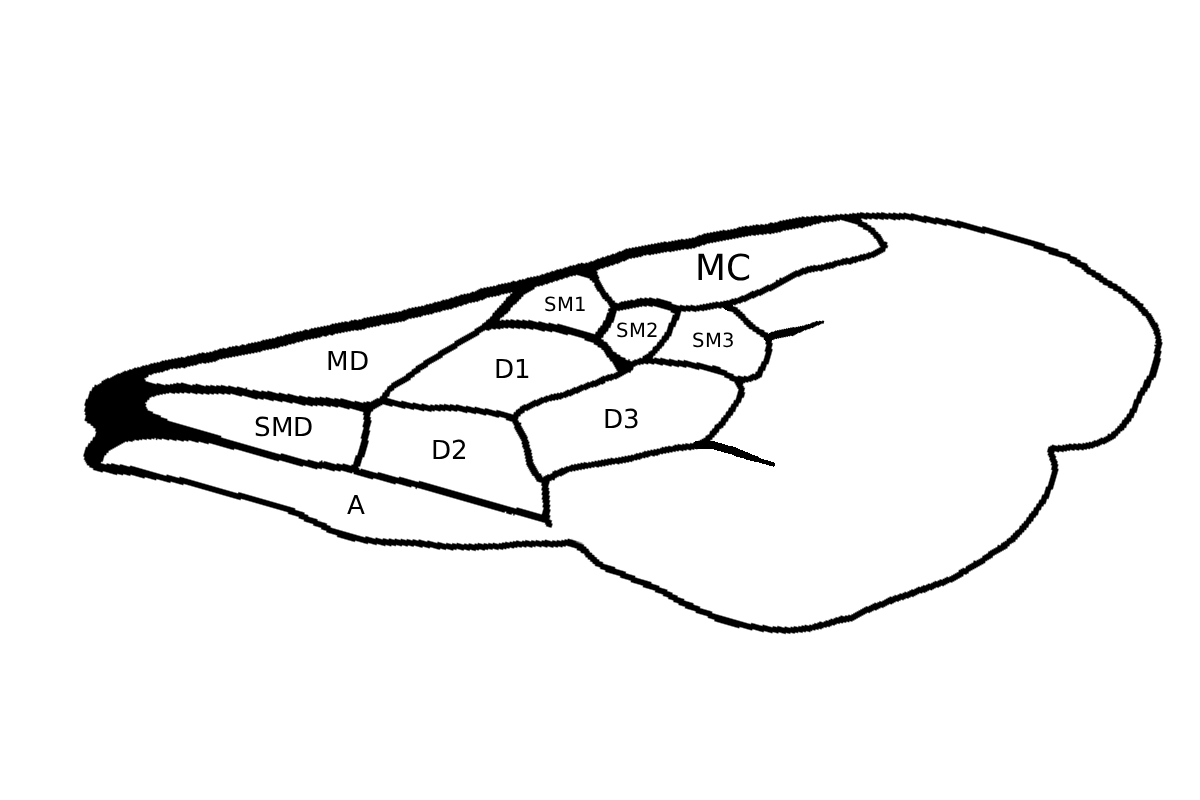
<style>
.page{position:relative;width:1200px;height:800px;background:#ffffff}
.page>*{position:absolute;margin:0}
.t1{font:35.9px "DejaVuSans";color:#000000}
.t2{font:19.6px "DejaVuSans";color:#000000}
.t3{font:26.1px "DejaVuSans";color:#000000}
</style>
<div class="page">
<p class="t1" style="left:698px;top:253px;width:52px;height:28px">MC</p>
<p class="t2" style="left:545px;top:296px;width:40px;height:16px">SM1</p>
<p class="t2" style="left:617px;top:322px;width:40px;height:16px">SM2</p>
<p class="t2" style="left:693px;top:332px;width:40px;height:16px">SM3</p>
<p class="t3" style="left:328px;top:350px;width:40px;height:21px">MD</p>
<p class="t3" style="left:496px;top:358px;width:33px;height:21px">D1</p>
<p class="t3" style="left:605px;top:408px;width:33px;height:21px">D3</p>
<p class="t3" style="left:255px;top:416px;width:57px;height:21px">SMD</p>
<p class="t3" style="left:433px;top:439px;width:33px;height:21px">D2</p>
<p class="t3" style="left:347px;top:495px;width:18px;height:19px">A</p>
</div>
